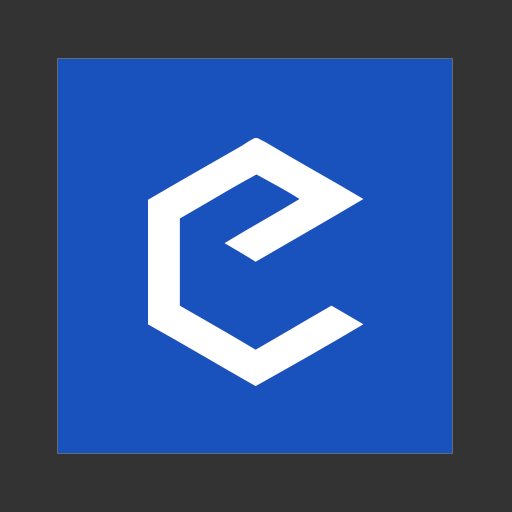
<style>
.page{position:relative;width:512px;height:512px;background:#1952bc}
.page>*{position:absolute;margin:0}
.t1{font:293.8px "Cubic";color:#ffffff}
</style>
<div class="page">
<p class="t1" style="left:148px;top:137px;width:216px;height:249px">E</p>
</div>
